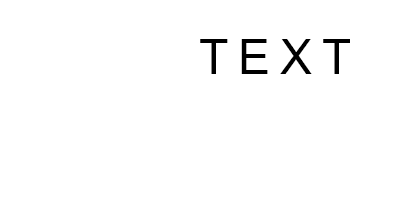
<style>
.page{position:relative;width:400px;height:200px;background:#ffffff}
.page>*{position:absolute;margin:0}
.t1{font:48px "ArialMT";letter-spacing:0.2em;color:#000000}
</style>
<div class="page">
<p class="t1" style="left:200px;top:39px;width:150px;height:35px">TEXT</p>
</div>
